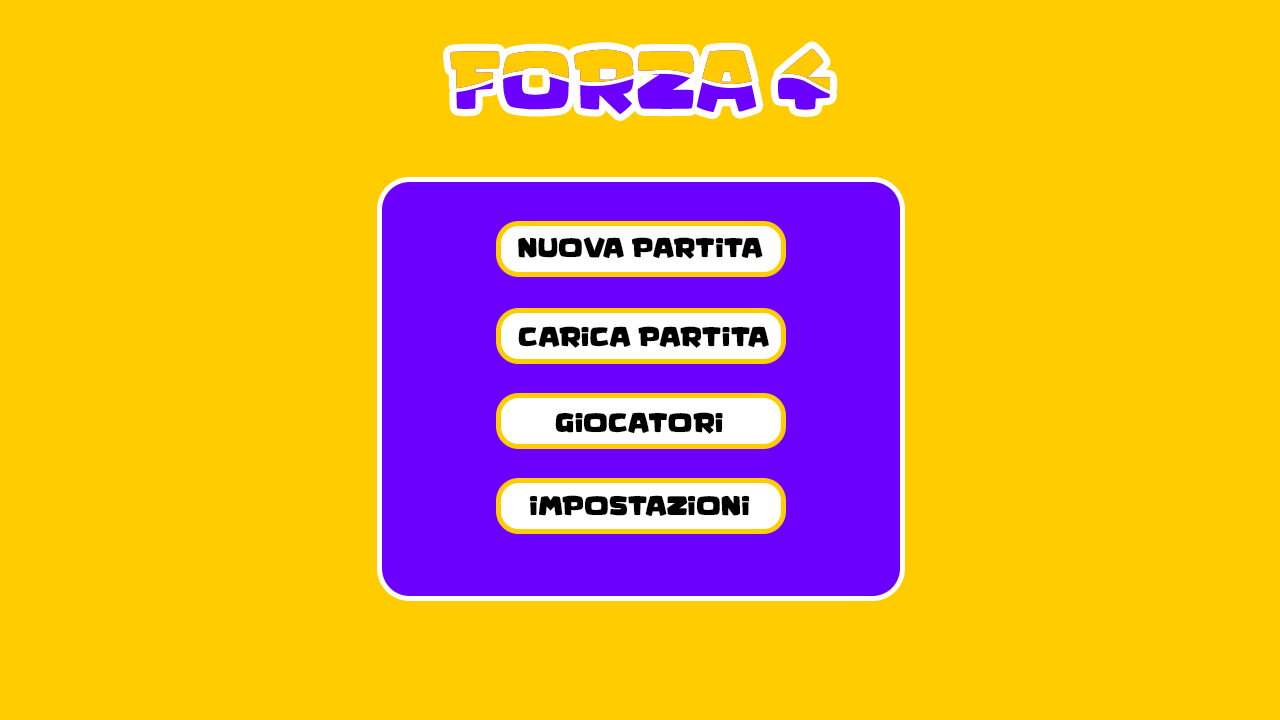
<style>
.page{position:relative;width:1280px;height:720px;background:#ffcc00}
.page>*{position:absolute;margin:0}
.t1{font:26.8px "KidGames";color:#000000}
</style>
<div class="page">
<p class="t1" style="left:518px;top:237px;width:245px;height:22px">NUOVA PARTITA</p>
<p class="t1" style="left:518px;top:326px;width:251px;height:22px">CARICA PARTITA</p>
<p class="t1" style="left:555px;top:412px;width:168px;height:22px">GIOCATORI</p>
<p class="t1" style="left:529px;top:495px;width:221px;height:21px">IMPOSTAZIONI</p>
</div>
